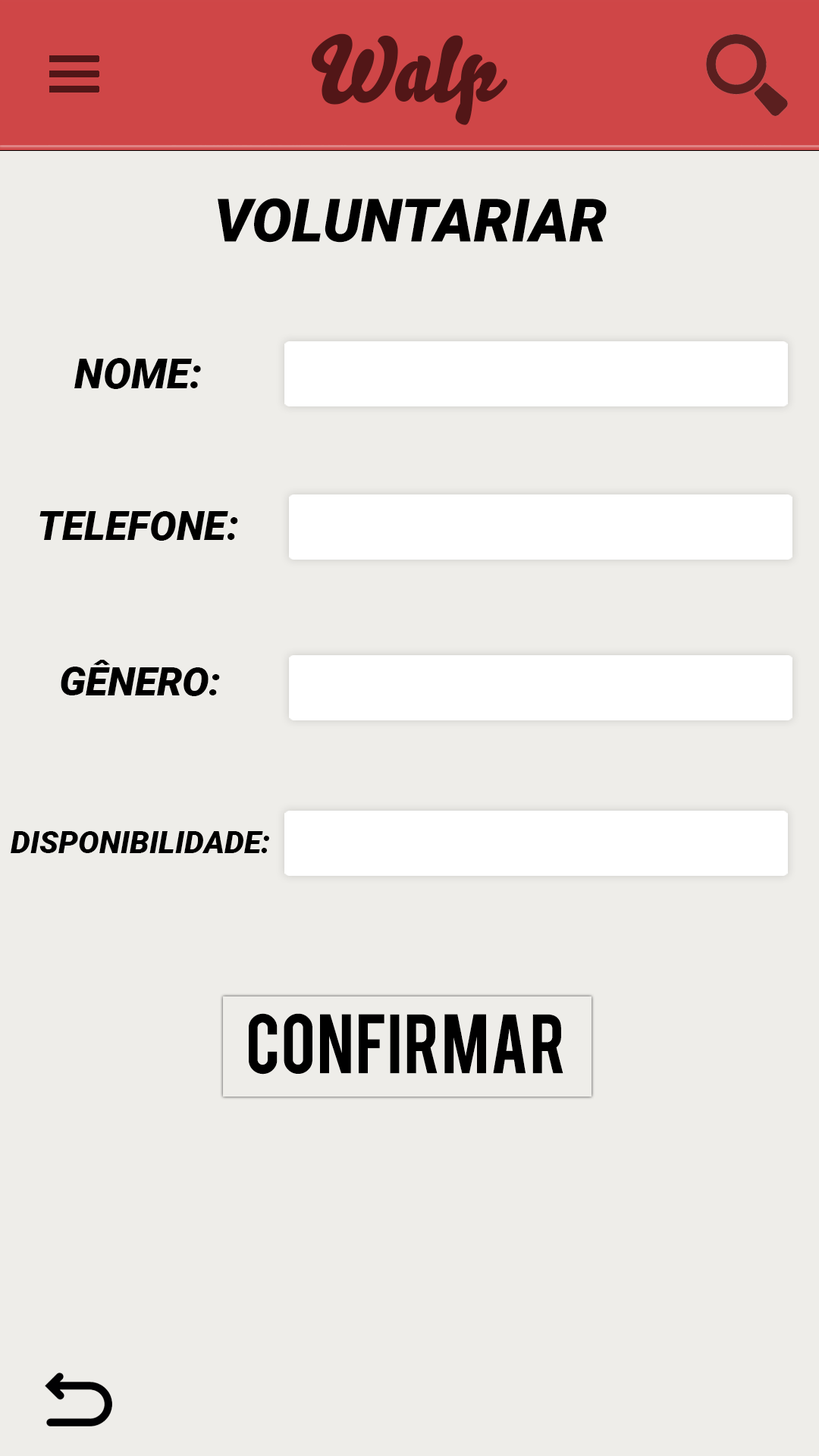
<style>
.page{position:relative;width:819px;height:1456px;background:#eeede9}
.page>*{position:absolute;margin:0}
.t1{font:90.5px "Bello-Pro";color:#521617}
.t2{font:59.6px "Roboto-BlackItalic";color:#000000}
.t3{font:41.8px "Roboto-BlackItalic";color:#000000}
.t4{font:40.3px "Roboto-BlackItalic";color:#000000}
.t5{font:39.7px "Roboto-BlackItalic";color:#000000}
.t6{font:31px "Roboto-BlackItalic";color:#000000}
.t7{font:65.8px "Bebas";color:#000000}
</style>
<div class="page">
<p class="t1" style="left:311px;top:33px;width:196px;height:92px">Walp</p>
<p class="t2" style="left:218px;top:198px;width:389px;height:45px">VOLUNTARIAR</p>
<p class="t3" style="left:74px;top:358px;width:127px;height:31px">NOME:</p>
<p class="t4" style="left:39px;top:511px;width:199px;height:30px">TELEFONE:</p>
<p class="t5" style="left:61px;top:660px;width:159px;height:36px">GÊNERO:</p>
<p class="t6" style="left:11px;top:831px;width:258px;height:22px">DISPONIBILIDADE:</p>
<p class="t7" style="left:249px;top:1013px;width:314px;height:62px">CONFIRMAR</p>
</div>
